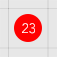
<style>
.page{position:relative;width:57px;height:57px;background:#e7e7e7}
.page>*{position:absolute;margin:0}
.t1{font:13.6px "Avenir-Light";color:#ffffff}
</style>
<div class="page">
<p class="t1" style="left:22px;top:23px;width:13px;height:11px">23</p>
</div>
